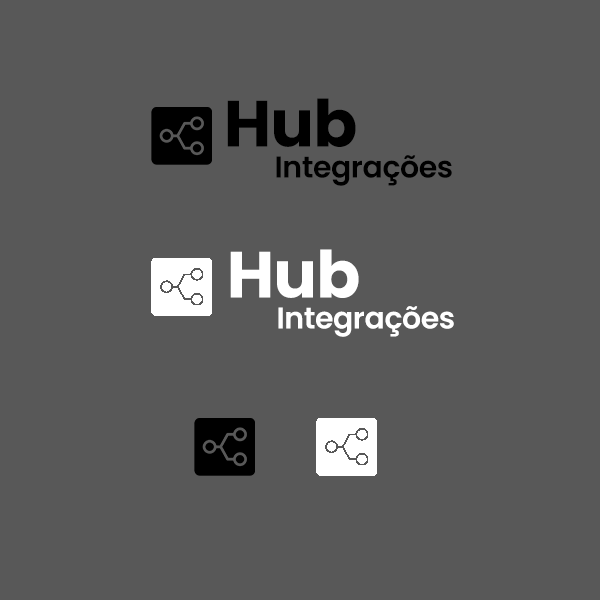
<style>
.page{position:relative;width:600px;height:600px;background:#585858}
.page>*{position:absolute;margin:0}
.t1{font:65px "Poppins-Bold";letter-spacing:-0.015em;color:#000000}
.t2{font:30px "Poppins-SemiBold";letter-spacing:-0.015em;color:#000000}
.t3{font:65px "Poppins-Bold";letter-spacing:-0.015em;color:#ffffff}
.t4{font:30px "Poppins-SemiBold";letter-spacing:-0.015em;color:#ffffff}
</style>
<div class="page">
<p class="t1" style="left:227px;top:98px;width:129px;height:49px">Hub</p>
<p class="t2" style="left:276px;top:155px;width:176px;height:31px">Integrações</p>
<p class="t3" style="left:230px;top:249px;width:129px;height:49px">Hub</p>
<p class="t4" style="left:278px;top:306px;width:176px;height:31px">Integrações</p>
</div>
